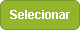
<style>
.page{position:relative;width:80px;height:30px;background:#94b52c}
.page>*{position:absolute;margin:0}
.t1{font:12px "Arial-BoldMT";color:#fefefe}
</style>
<div class="page">
<p class="t1" style="left:10px;top:10px;width:60px;height:9px">Selecionar</p>
</div>
